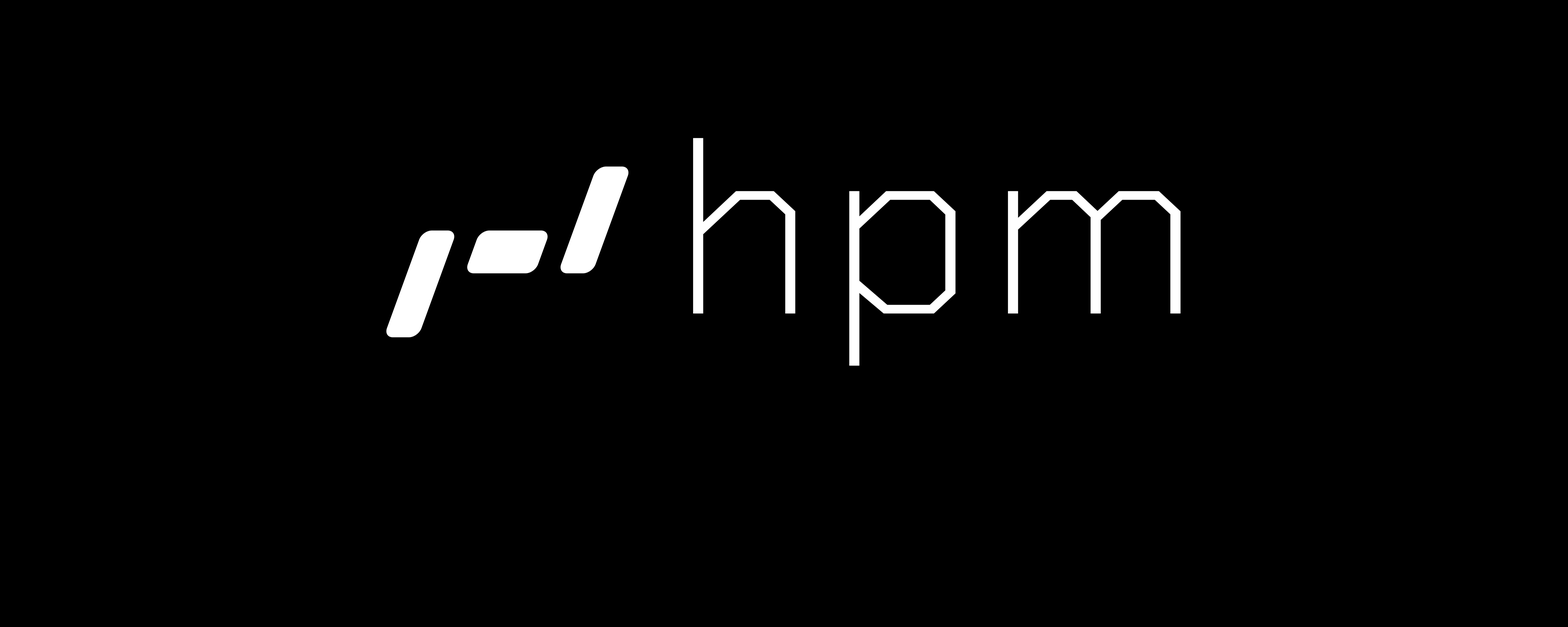
<style>
.page{position:relative;width:1568px;height:627px;background:#000000}
.page>*{position:absolute;margin:0}
.t1{font:245.7px "ChakraPetch-ExtraLight";letter-spacing:0.04em;color:#ffffff;scale:1.07 1}
</style>
<div class="page">
<p class="t1" style="left:693px;top:138px;width:488px;height:228px">hpm</p>
</div>
